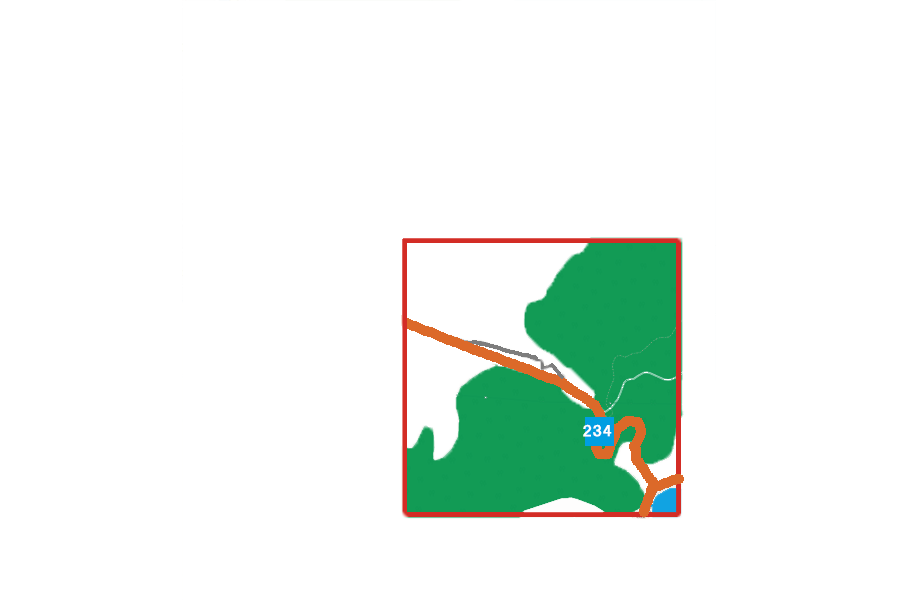
<style>
.page{position:relative;width:900px;height:600px;background:#ffffff}
.page>*{position:absolute;margin:0}
.t1{font:14px "HGSGothicE";color:#ffffff;scale:1.32 1}
</style>
<div class="page">
<p class="t1" style="left:583px;top:424px;width:29px;height:13px">234</p>
</div>
